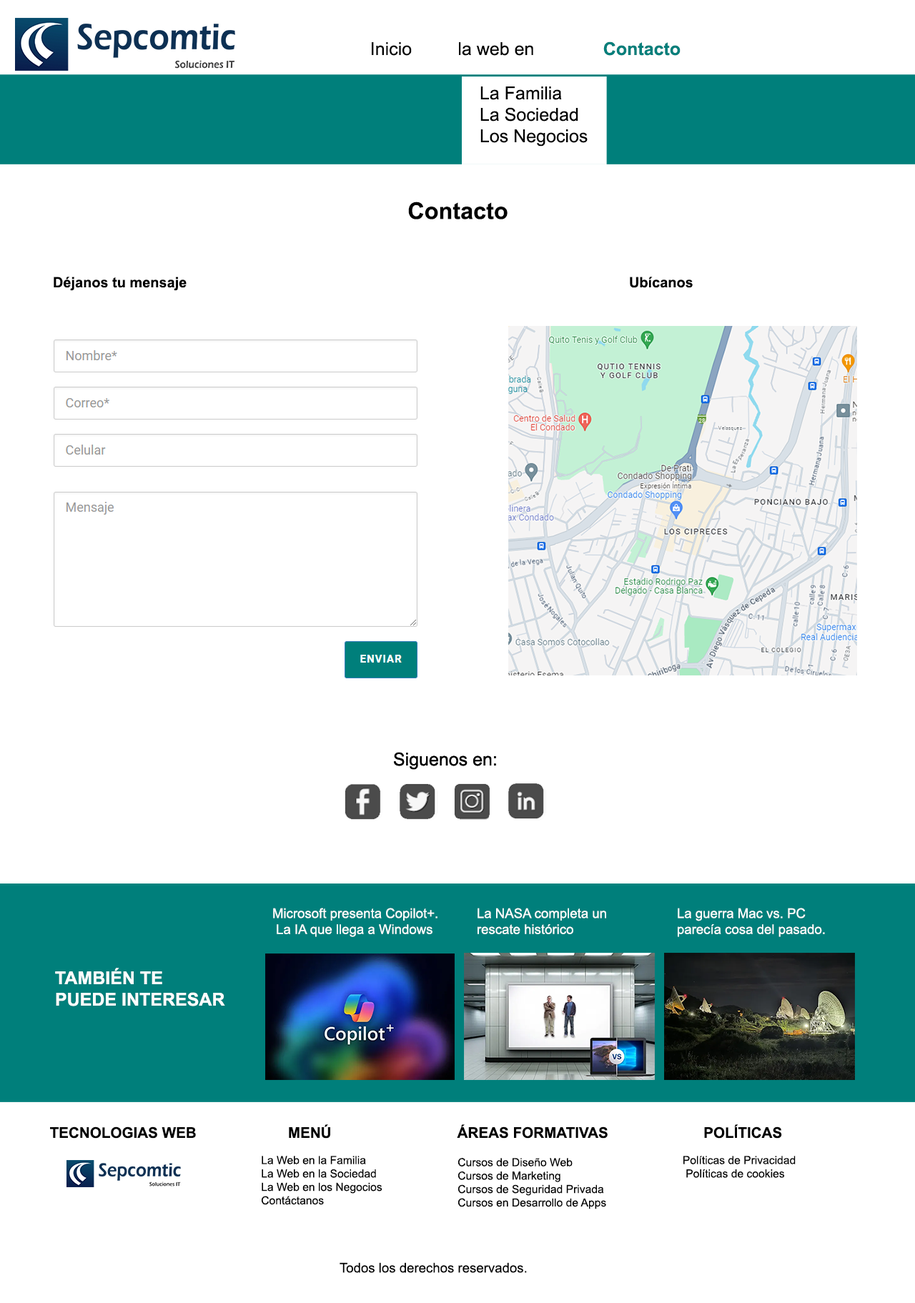
<style>
.page{position:relative;width:915px;height:1303px;background:#ffffff}
.page>*{position:absolute;margin:0}
.t1{font:17.9px "Arial-BoldMT";color:#007f7b}
.t2{font:17.9px "ArialMT";color:#000000}
.t3{font:23.2px "Arial-BoldMT";color:#000000}
.t4{font:14.3px "Arial-BoldMT";color:#000000}
.t5{font:13.3px "ArialMT";color:#ffffff}
.t6{font:17.9px "Arial-BoldMT";color:#ffffff}
.t7{font:14.7px "Arial-BoldMT";color:#000000}
.t8{font:11.2px "ArialMT";color:#000000}
.t9{font:13.3px "ArialMT";color:#010101}
</style>
<div class="page">
<p class="t1" style="left:603px;top:41px;width:78px;height:15px">Contacto</p>
<p class="t2" style="left:372px;top:42px;width:40px;height:14px">Inicio</p>
<p class="t2" style="left:459px;top:42px;width:74px;height:14px">la web en</p>
<p class="t2" style="left:480px;top:86px;width:108px;height:61px">La Familia<br>La Sociedad<br>Los Negocios</p>
<p class="t3" style="left:408px;top:202px;width:100px;height:17px">Contacto</p>
<p class="t4" style="left:54px;top:277px;width:133px;height:14px">Déjanos tu mensaje</p>
<p class="t4" style="left:630px;top:277px;width:63px;height:11px">Ubícanos</p>
<p class="t2" style="left:394px;top:752px;width:102px;height:18px">Siguenos en:</p>
<p class="t2" style="left:394px;top:752px;width:102px;height:18px">Siguenos en:</p>
<p class="t5" style="left:273px;top:908px;width:164px;height:29px">Microsoft presenta Copilot+.<br> La IA que llega a Windows</p>
<p class="t5" style="left:478px;top:908px;width:128px;height:26px">La NASA completa un <br>rescate histórico</p>
<p class="t5" style="left:678px;top:908px;width:147px;height:29px">La guerra Mac vs. PC <br>parecía cosa del pasado.</p>
<p class="t6" style="left:55px;top:968px;width:170px;height:39px">TAMBIÉN TE <br>PUEDE INTERESAR</p>
<p class="t7" style="left:50px;top:1127px;width:146px;height:12px">TECNOLOGIAS WEB</p>
<p class="t7" style="left:289px;top:1124px;width:41px;height:15px">MENÚ</p>
<p class="t7" style="left:457px;top:1124px;width:151px;height:15px">ÁREAS FORMATIVAS</p>
<p class="t7" style="left:704px;top:1124px;width:78px;height:15px">POLÍTICAS</p>
<p class="t8" style="left:262px;top:1156px;width:120px;height:49px">La Web en la Familia<br> La Web en la Sociedad<br> La Web en los Negocios<br> Contáctanos</p>
<p class="t8" style="left:683px;top:1156px;width:113px;height:22px">Políticas de Privacidad<br> Políticas de cookies</p>
<p class="t8" style="left:458px;top:1158px;width:148px;height:52px">Cursos de Diseño Web<br> Cursos de Marketing<br> Cursos de Seguridad Privada<br> Cursos en Desarrollo de Apps</p>
<p class="t9" style="left:340px;top:1262px;width:187px;height:11px">Todos los derechos reservados.</p>
</div>
